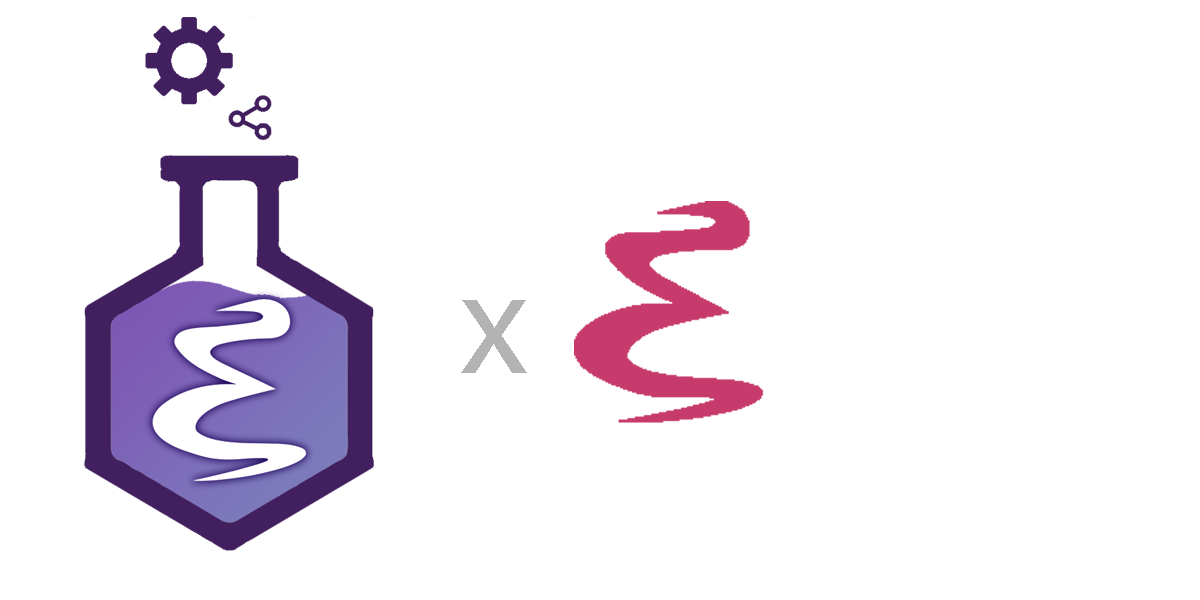
<style>
.page{position:relative;width:1200px;height:600px;background:#ffffff}
.page>*{position:absolute;margin:0}
.t1{font:150px "MyriadPro-Regular";color:#b3b3b3}
</style>
<div class="page">
<p class="t1" style="left:461px;top:300px;width:66px;height:73px">x</p>
</div>
